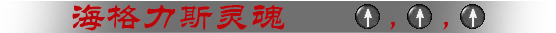
<style>
.page{position:relative;width:556px;height:33px;background:#707070}
.page>*{position:absolute;margin:0}
.t1{font:36px "STLiti";color:#ba060b}
</style>
<div class="page">
<p class="t1" style="left:72px;top:4px;width:376px;height:27px">海格力斯灵魂           ，    ，</p>
</div>
